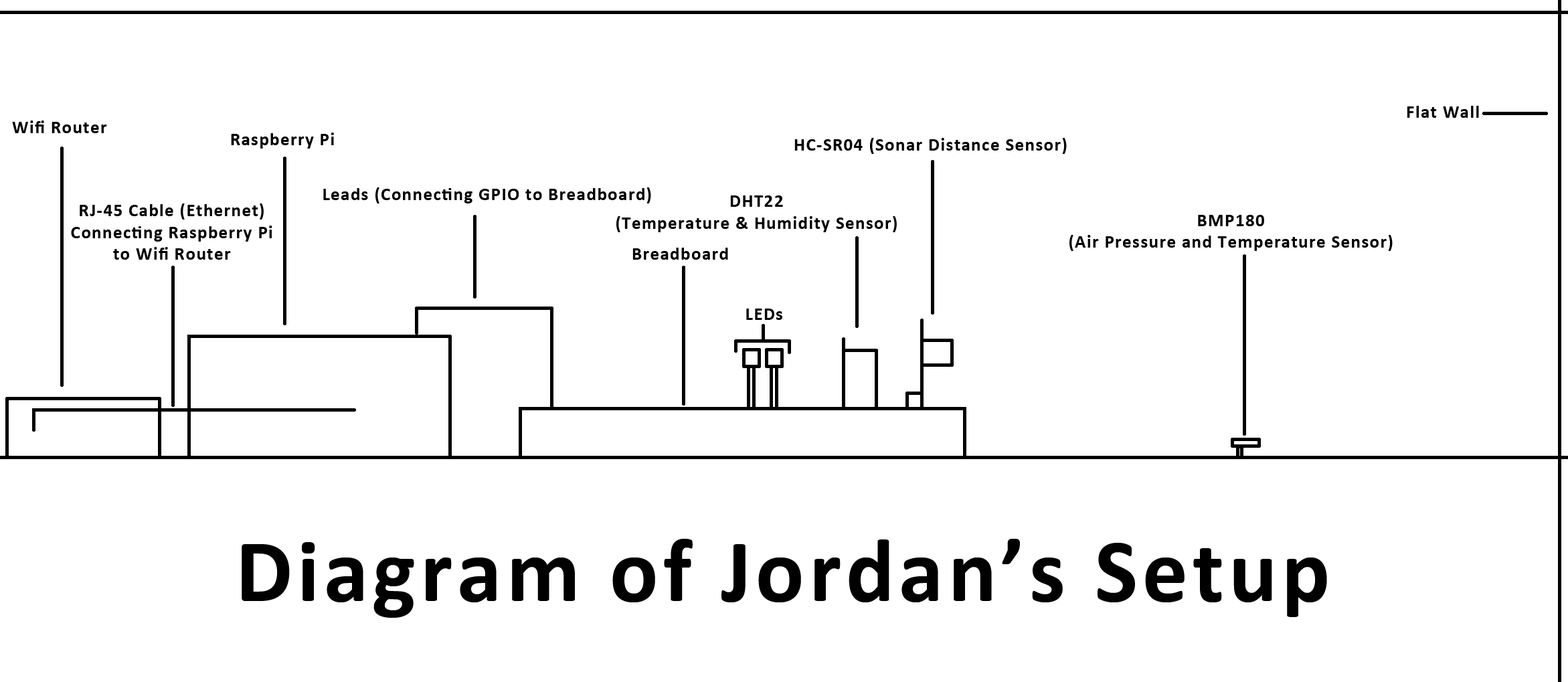
<style>
.page{position:relative;width:1568px;height:682px;background:#ffffff}
.page>*{position:absolute;margin:0}
.t1{font:18.1px "Calibri-Bold";letter-spacing:0.05em;color:#000000}
.t2{font:90.6px "Calibri-Bold";letter-spacing:0.05em;color:#000000}
</style>
<div class="page">
<p class="t1" style="left:1407px;top:106px;width:72px;height:12px">Flat Wall</p>
<p class="t1" style="left:12px;top:120px;width:95px;height:13px">Wifi Router</p>
<p class="t1" style="left:231px;top:133px;width:103px;height:16px">Raspberry Pi</p>
<p class="t1" style="left:794px;top:138px;width:273px;height:16px">HC-SR04 (Sonar Distance Sensor)</p>
<p class="t1" style="left:323px;top:187px;width:328px;height:16px">Leads (Connecting GPIO to Breadboard)</p>
<p class="t1" style="left:616px;top:195px;width:281px;height:37px;text-align:center">DHT22<br>(Temperature &amp; Humidity Sensor)</p>
<p class="t1" style="left:71px;top:203px;width:201px;height:57px;text-align:center">RJ-45 Cable (Ethernet)<br>Connecting Raspberry Pi<br>to Wifi Router</p>
<p class="t1" style="left:1069px;top:215px;width:324px;height:36px;text-align:center">BMP180<br>(Air Pressure and Temperature Sensor)</p>
<p class="t1" style="left:632px;top:248px;width:96px;height:12px">Breadboard</p>
<p class="t1" style="left:746px;top:309px;width:36px;height:11px">LEDs</p>
<p class="t2" style="left:242px;top:539px;width:1085px;height:79px">Diagram of Jordan’s Setup</p>
</div>
